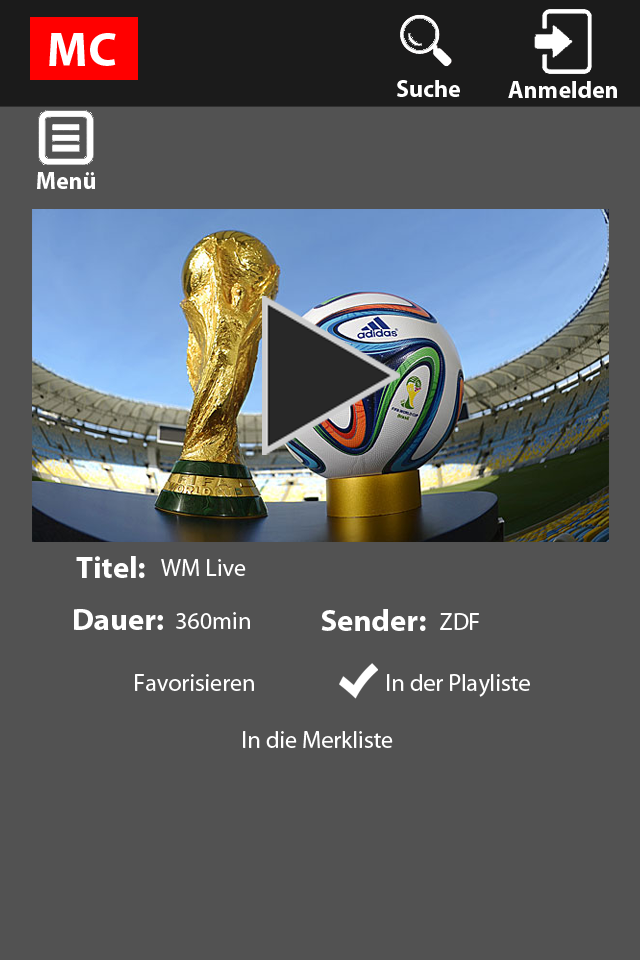
<style>
.page{position:relative;width:640px;height:960px;background:#525252}
.page>*{position:absolute;margin:0}
.t1{font:48px "MyriadPro-Bold";color:#ffffff}
.t2{font:24px "MyriadPro-Bold";color:#ffffff}
.t3{font:31px "MyriadPro-Bold";color:#ffffff}
.t4{font:24px "MyriadPro-Regular";color:#ffffff}
</style>
<div class="page">
<p class="t1" style="left:49px;top:33px;width:67px;height:33px">MC</p>
<p class="t2" style="left:397px;top:80px;width:63px;height:17px">Suche</p>
<p class="t2" style="left:508px;top:81px;width:109px;height:17px">Anmelden</p>
<p class="t2" style="left:37px;top:172px;width:58px;height:17px">Menü</p>
<p class="t3" style="left:76px;top:556px;width:69px;height:22px">Titel:</p>
<p class="t4" style="left:161px;top:559px;width:85px;height:17px">WM Live</p>
<p class="t3" style="left:74px;top:609px;width:89px;height:21px">Dauer:</p>
<p class="t4" style="left:176px;top:612px;width:74px;height:17px">360min</p>
<p class="t3" style="left:321px;top:609px;width:105px;height:22px">Sender:</p>
<p class="t4" style="left:440px;top:613px;width:39px;height:17px">ZDF</p>
<p class="t4" style="left:135px;top:674px;width:395px;height:74px">Favorisieren    In der Playliste<br><br>   In die Merkliste</p>
</div>
